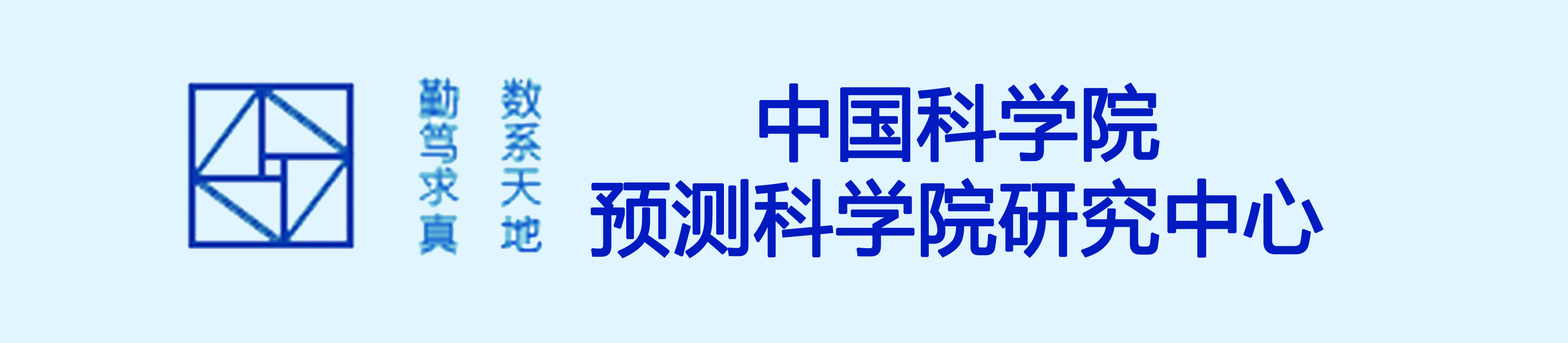
<style>
.page{position:relative;width:1568px;height:343px;background:#e0f5fd}
.page>*{position:absolute;margin:0}
.t1{font:79.4px "MicrosoftYaHei";color:#021bc1;font-weight:bold}
</style>
<div class="page">
<p class="t1" style="left:591px;top:82px;width:733px;height:177px;text-align:center">中国科学院<br>预测科学院研究中心</p>
</div>
